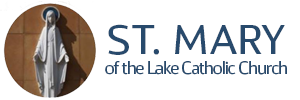
<style>
.page{position:relative;width:300px;height:100px;background:#ffffff}
.page>*{position:absolute;margin:0}
.t1{font:17px "Kandin-Regular";letter-spacing:-0.08em;color:#284a6c}
.t2{font:40px "Kandin-Regular";color:#284a6c}
</style>
<div class="page">
<p class="t1" style="left:105px;top:24px;width:182px;height:51px;text-align:center"><span class="t2">ST. MARY<br></span>of the Lake Catholic Church</p>
</div>
